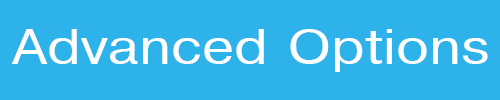
<style>
.page{position:relative;width:500px;height:100px;background:#2db2ea}
.page>*{position:absolute;margin:0}
.t1{font:48px "Helvetica";color:#ffffff;scale:1.2 1}
</style>
<div class="page">
<p class="t1" style="left:11px;top:29px;width:477px;height:43px">Advanced Options</p>
</div>
